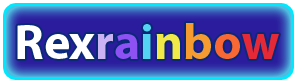
<style>
.page{position:relative;width:296px;height:82px}
.page>*{position:absolute;margin:0}
.t1{font:50px "MyriadPro-Bold";color:#ffffff}
.t2{font:50px "MyriadPro-Bold";color:#ccb4f4}
.t3{font:50px "MyriadPro-Bold";color:#8e51f4}
.t4{font:50px "MyriadPro-Bold";color:#55d3f3}
.t5{font:50px "MyriadPro-Bold";color:#f0e948}
.t6{font:50px "MyriadPro-Bold";color:#f59b30}
.t7{font:50px "MyriadPro-Bold";color:#f76834}
.t8{font:50px "MyriadPro-Bold";color:#e52937}
</style>
<div class="page">
<p class="t1" style="left:17px;top:23px;width:262px;height:36px">Rex<span class="t2">r</span><span class="t3">a</span><span class="t4">i</span><span class="t5">n</span><span class="t6">b</span><span class="t7">o</span><span class="t8">w</span></p>
</div>
